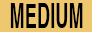
<style>
.page{position:relative;width:92px;height:32px;background:#eec76e}
.page>*{position:absolute;margin:0}
.t1{font:34px "Helvetica-Bold";color:#000000;scale:0.54 1}
</style>
<div class="page">
<p class="t1" style="left:10px;top:3px;width:73px;height:25px">MEDIUM</p>
</div>
